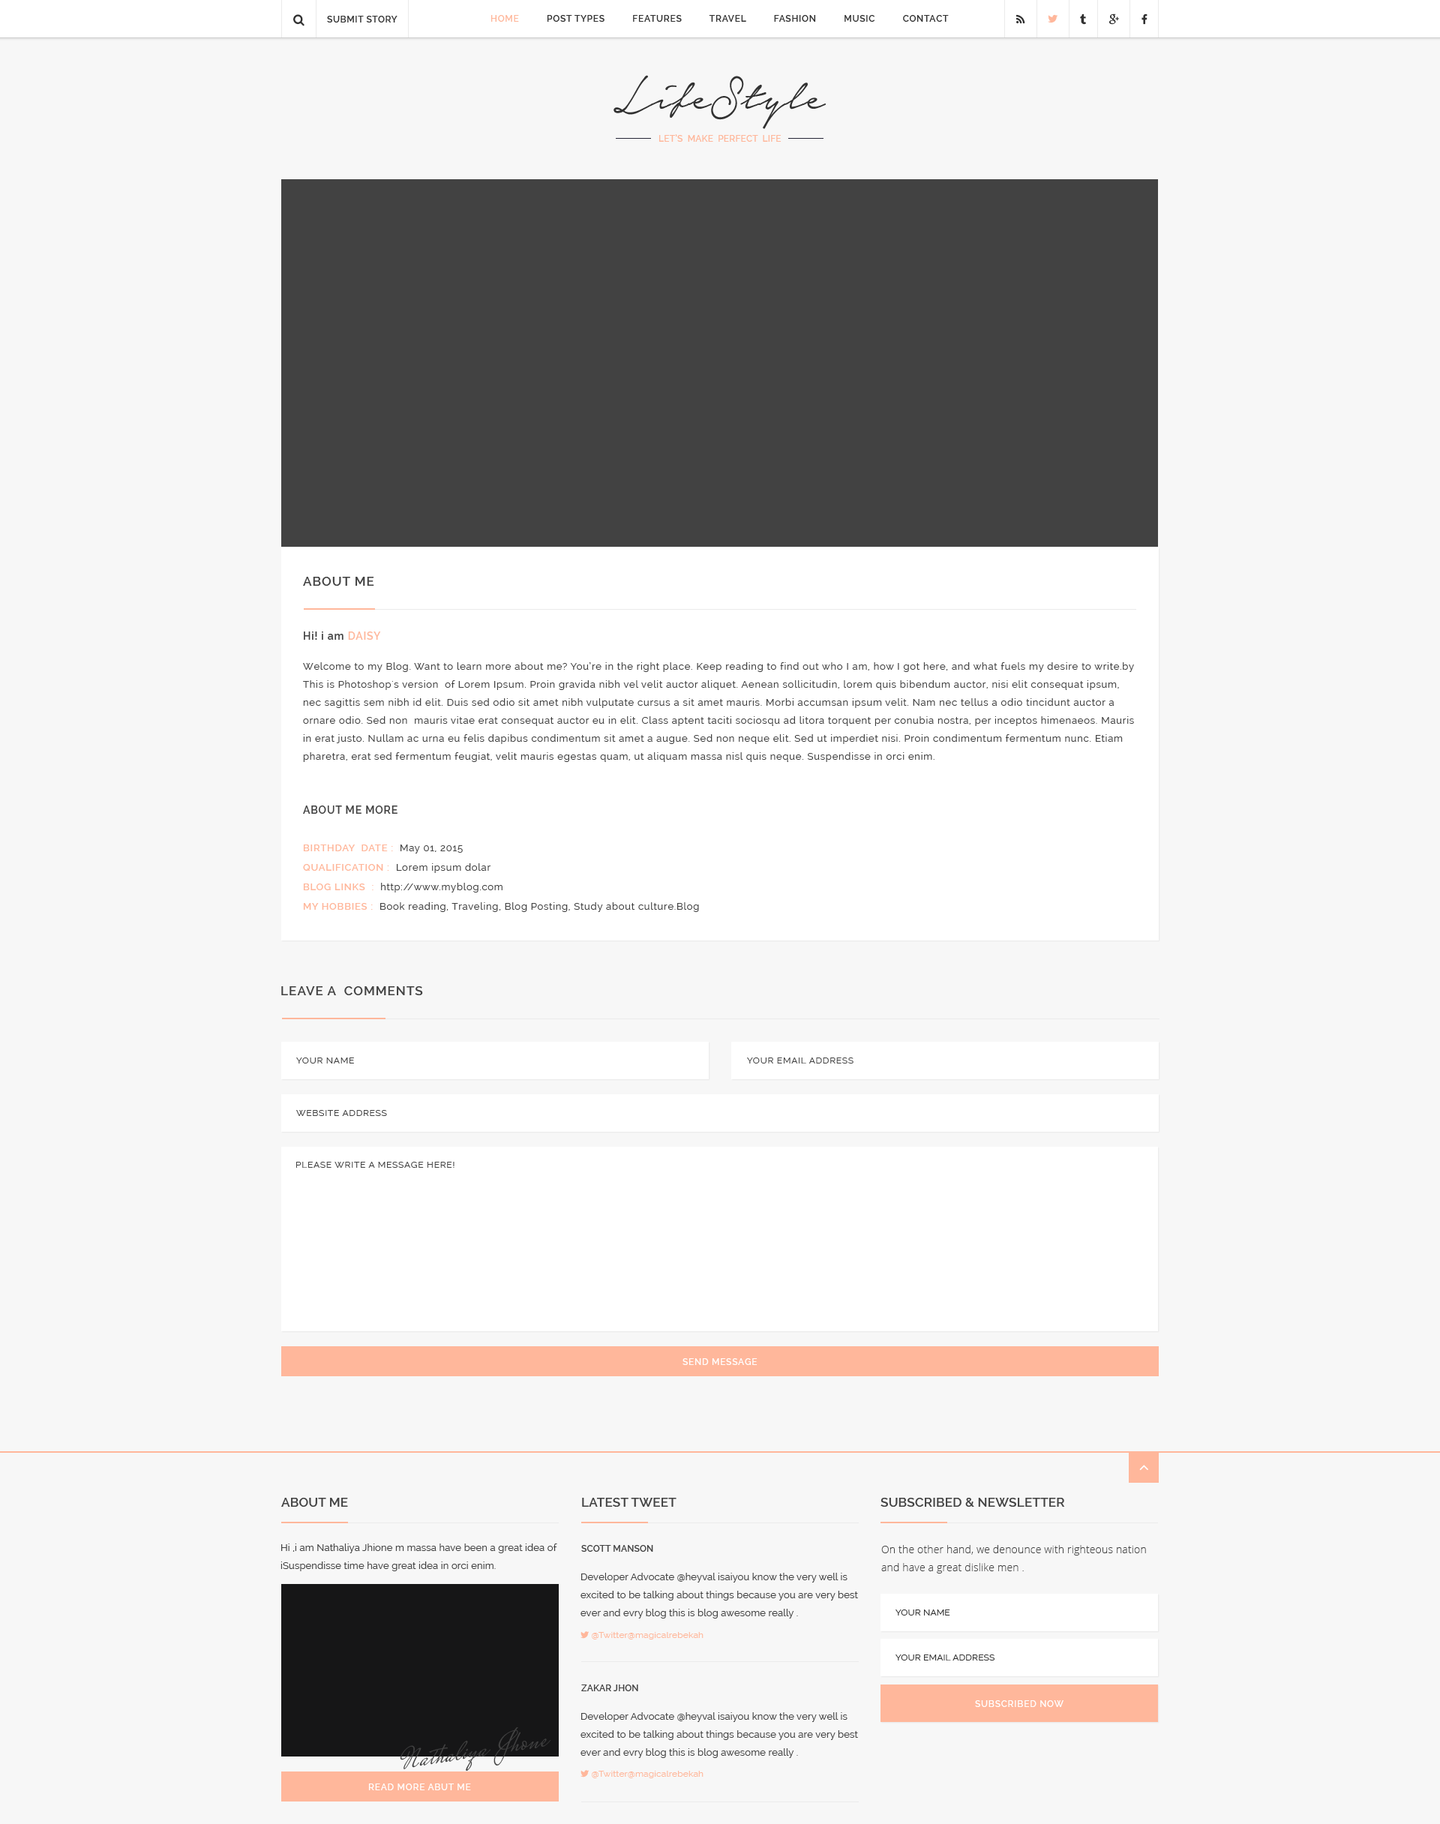
<style>
.page{position:relative;width:1440px;height:1824px;background:#f7f7f7}
.page>*{position:absolute;margin:0}
.t1{font:9px "Raleway-SemiBold";letter-spacing:0.05em;color:#313131;text-transform:uppercase}
.t2{font:9px "Raleway-SemiBold";letter-spacing:0.06em;color:#313131;text-transform:uppercase}
.t3{font:9px "Raleway-SemiBold";letter-spacing:0.06em;color:#ffb79b;text-transform:uppercase}
.t4{font:60px "NoteraPersonalUseOnly";letter-spacing:0.012em;color:#313131}
.t5{font:9px "Raleway-SemiBold";letter-spacing:0.012em;color:#ffb79b;text-transform:uppercase}
.t6{font:12.8px "Raleway-SemiBold";letter-spacing:0.06em;color:#424242;text-transform:uppercase}
.t7{font:9.8px/18px "Raleway";letter-spacing:0.06em;color:#424242}
.t8{font:10.5px/30px "Raleway-SemiBold";letter-spacing:0.06em;color:#424242}
.t9{font:10.5px/30px "Raleway-SemiBold";letter-spacing:0.06em;color:#ffb79b;text-transform:uppercase}
.t10{font:9.8px/30px "Raleway";letter-spacing:0.06em;color:#424242}
.t11{font:10.5px/18px "Raleway-SemiBold";letter-spacing:0.06em;color:#424242;text-transform:uppercase}
.t12{font:9.8px/19.5px "Raleway-SemiBold";letter-spacing:0.06em;color:#ffb79b;text-transform:uppercase}
.t13{font:9.8px/19.5px "Raleway";letter-spacing:0.06em;color:#424242}
.t14{font:9px "Raleway";letter-spacing:0.06em;color:#424242;text-transform:uppercase}
.t15{font:9px "Raleway-SemiBold";letter-spacing:0.06em;color:#ffffff;text-transform:uppercase}
.t16{font:12.8px "Raleway-SemiBold";letter-spacing:0.012em;color:#424242;text-transform:uppercase}
.t17{font:9.8px/18px "Raleway";letter-spacing:0.012em;color:#424242}
.t18{font:9px "Raleway-SemiBold";letter-spacing:0.012em;color:#424242;text-transform:uppercase}
.t19{font:10.5px/18px "OpenSans-Light";letter-spacing:0.012em;color:#424242}
.t20{font:9px "Raleway";letter-spacing:0.012em;color:#313131;text-transform:uppercase}
</style>
<div class="page">
<p class="t1" style="left:327px;top:16px;width:71px;height:6px">Submit Story</p>
<p class="t2" style="left:490px;top:15px;width:459px;height:7px"><span class="t3">Home          </span>Post Types          Features          Travel          Fashion          Music          Contact</p>
<p class="t4" style="left:614px;top:75px;width:212px;height:54px">LifeStyle</p>
<p class="t5" style="left:658px;top:134px;width:124px;height:8px">Let’s  Make  Perfect  Life</p>
<p class="t6" style="left:303px;top:577px;width:71px;height:9px">About me</p>
<p class="t7" style="left:303px;top:632px;width:831px;height:280px"><span class="t8">Hi! i am </span><span class="t9">DAISY<br></span><span class="t10">Welcome to my Blog. Want to learn more about me? You’re in the right place. Keep reading to find out who I am, how I got here, and what fuels my desire to write.by<br></span>This is Photoshop's version  of Lorem Ipsum. Proin gravida nibh vel velit auctor aliquet. Aenean sollicitudin, lorem quis bibendum auctor, nisi elit consequat ipsum, nec sagittis sem nibh id elit. Duis sed odio sit amet nibh vulputate cursus a sit amet mauris. Morbi accumsan ipsum velit. Nam nec tellus a odio tincidunt auctor a ornare odio. Sed non  mauris vitae erat consequat auctor eu in elit. Class aptent taciti sociosqu ad litora torquent per conubia nostra, per inceptos himenaeos. Mauris in erat justo. Nullam ac urna eu felis dapibus condimentum sit amet a augue. Sed non neque elit. Sed ut imperdiet nisi. Proin condimentum fermentum nunc. Etiam pharetra, erat sed fermentum feugiat, velit mauris egestas quam, ut aliquam massa nisl quis neque. Suspendisse in orci enim.<br><br><span class="t11"><br>About me More<br><br></span><span class="t12">Birthday  Date :  </span><span class="t13">May 01, 2015<br></span><span class="t12">Qualification :</span><span class="t13">  Lorem ipsum dolar<br></span><span class="t12">Blog Links  :  </span><span class="t13">http://www.myblog.com<br></span><span class="t12">My Hobbies :  </span><span class="t13">Book reading, Traveling, Blog Posting, Study about culture.Blog</span></p>
<p class="t6" style="left:281px;top:986px;width:142px;height:9px">Leave a  comments</p>
<p class="t14" style="left:296px;top:1058px;width:58px;height:6px">Your Name</p>
<p class="t14" style="left:747px;top:1058px;width:107px;height:6px">Your Email Address</p>
<p class="t14" style="left:296px;top:1110px;width:91px;height:6px">Website Address</p>
<p class="t14" style="left:296px;top:1162px;width:158px;height:6px">Please write a message here!</p>
<p class="t15" style="left:682px;top:1358px;width:76px;height:7px">send message</p>
<p class="t16" style="left:281px;top:1498px;width:67px;height:9px">About me</p>
<p class="t16" style="left:582px;top:1498px;width:94px;height:9px">latest tweet</p>
<p class="t16" style="left:880px;top:1498px;width:185px;height:9px">Subscribed &amp; Newsletter</p>
<p class="t17" style="left:280px;top:1544px;width:277px;height:27px">Hi ,i am Nathaliya Jhione m massa have been a great idea of iSuspendisse time have great idea in orci enim.</p>
<p class="t18" style="left:581px;top:1545px;width:72px;height:7px">Scott Manson</p>
<p class="t19" style="left:881px;top:1545px;width:265px;height:29px">On the other hand, we denounce with righteous nation and have a great dislike men .</p>
<p class="t17" style="left:580px;top:1573px;width:278px;height:45px">Developer Advocate @heyval isaiyou know the very well is excited to be talking about things because you are very best ever and evry blog this is blog awesome really .</p>
<p class="t20" style="left:896px;top:1610px;width:54px;height:6px">Your Name</p>
<p class="t20" style="left:896px;top:1654px;width:98px;height:6px">Your Email Address</p>
<p class="t18" style="left:581px;top:1684px;width:57px;height:7px">Zakar Jhon</p>
<p class="t15" style="left:975px;top:1700px;width:89px;height:7px">Subscribed Now</p>
<p class="t17" style="left:580px;top:1712px;width:278px;height:46px">Developer Advocate @heyval isaiyou know the very well is excited to be talking about things because you are very best ever and evry blog this is blog awesome really .</p>
<p class="t15" style="left:368px;top:1784px;width:103px;height:6px">read more abut me</p>
</div>
